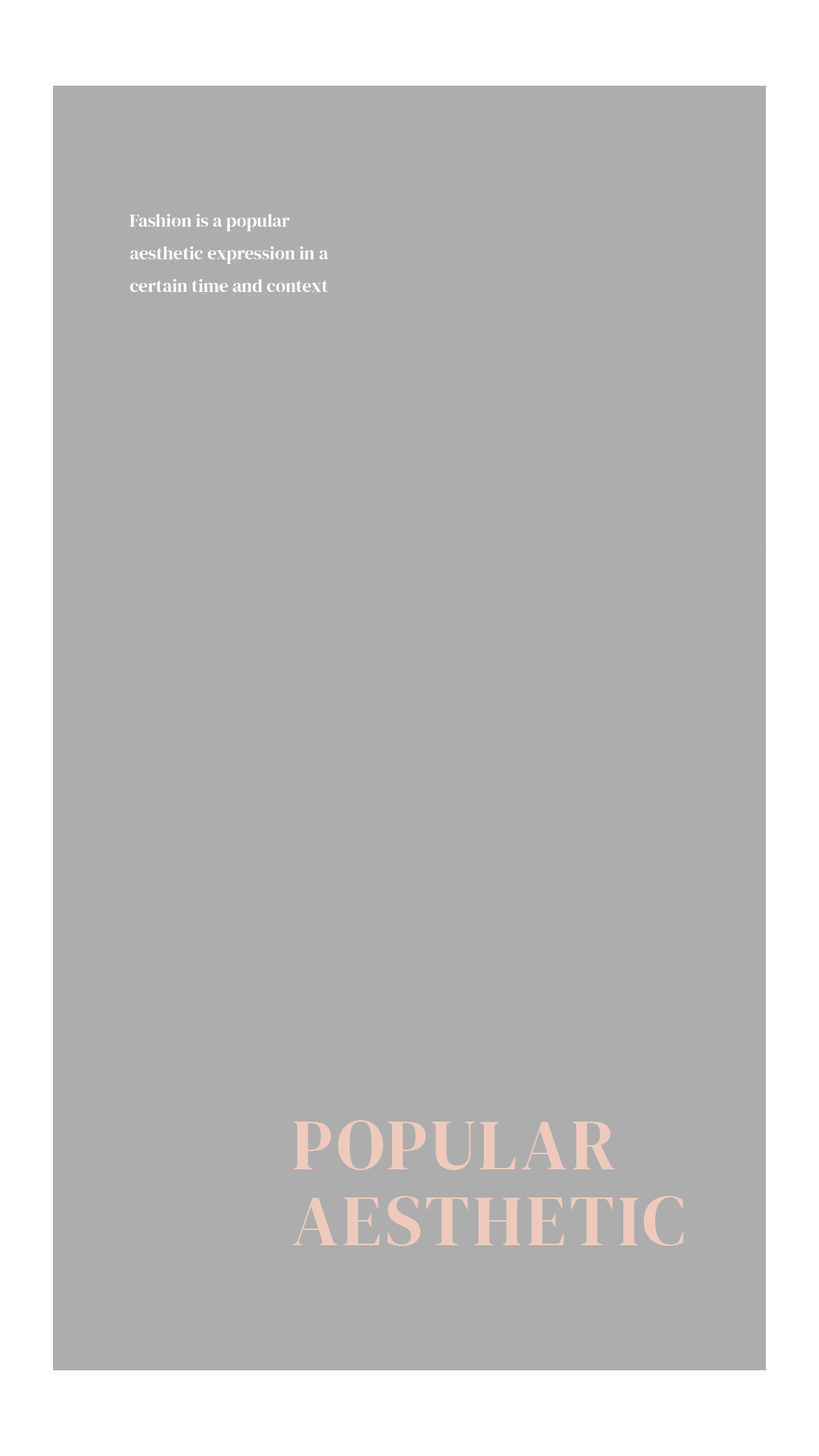
<style>
.page{position:relative;width:819px;height:1456px;background:#adadad}
.page>*{position:absolute;margin:0}
.t1{font:18.2px/32.6px "DMSerifDisplay-Regular";color:#ffffff}
.t2{font:71.3px/75.8px "DMSerifDisplay-Regular";letter-spacing:0.053em;color:#eecabd;text-transform:uppercase}
</style>
<div class="page">
<p class="t1" style="left:130px;top:214px;width:198px;height:78px">Fashion is a popular aesthetic expression in a certain time and context</p>
<p class="t2" style="left:292px;top:1120px;width:392px;height:126px">popular<br>aesthetic</p>
</div>
